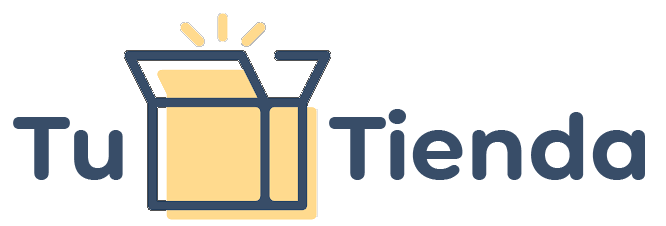
<style>
.page{position:relative;width:666px;height:226px;background:#ffffff}
.page>*{position:absolute;margin:0}
.t1{font:88.8px "CMGSans-BoldRounded";color:#384d68}
</style>
<div class="page">
<p class="t1" style="left:13px;top:109px;width:632px;height:71px">Tu        Tienda</p>
</div>
